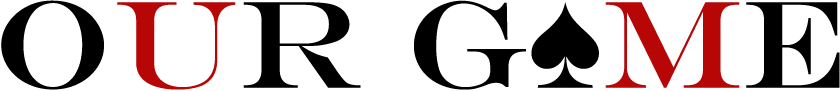
<style>
.page{position:relative;width:840px;height:91px;background:#ffffff}
.page>*{position:absolute;margin:0}
.t1{font:125px "EngraversMT";color:#000000}
.t2{font:125px "EngraversMT";color:#b60606}
.t3{font:141.7px "TimesNewRomanPSMT";color:#000000}
</style>
<div class="page">
<p class="t1" style="left:1px;top:0px;width:839px;height:90px">O<span class="t2">U</span>R G<span class="t3">♠</span><span class="t2">M</span>E</p>
</div>
